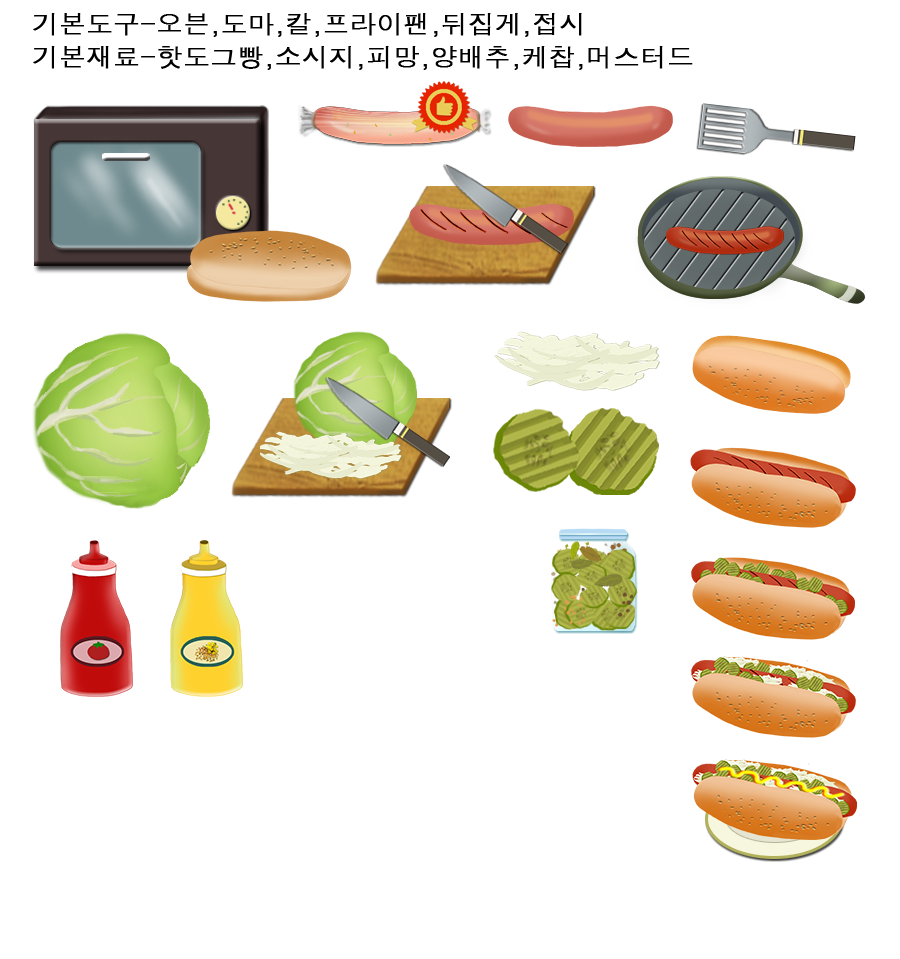
<style>
.page{position:relative;width:900px;height:959px;background:#ffffff}
.page>*{position:absolute;margin:0}
.t1{font:25px "Dotum";color:#000000;font-weight:bold;scale:1.05 1}
</style>
<div class="page">
<p class="t1" style="left:33px;top:13px;width:549px;height:24px">기본도구-오븐,도마,칼,프라이팬,뒤집게,접시</p>
<p class="t1" style="left:33px;top:46px;width:660px;height:24px">기본재료-핫도그빵,소시지,피망,양배추,케찹,머스터드</p>
</div>
